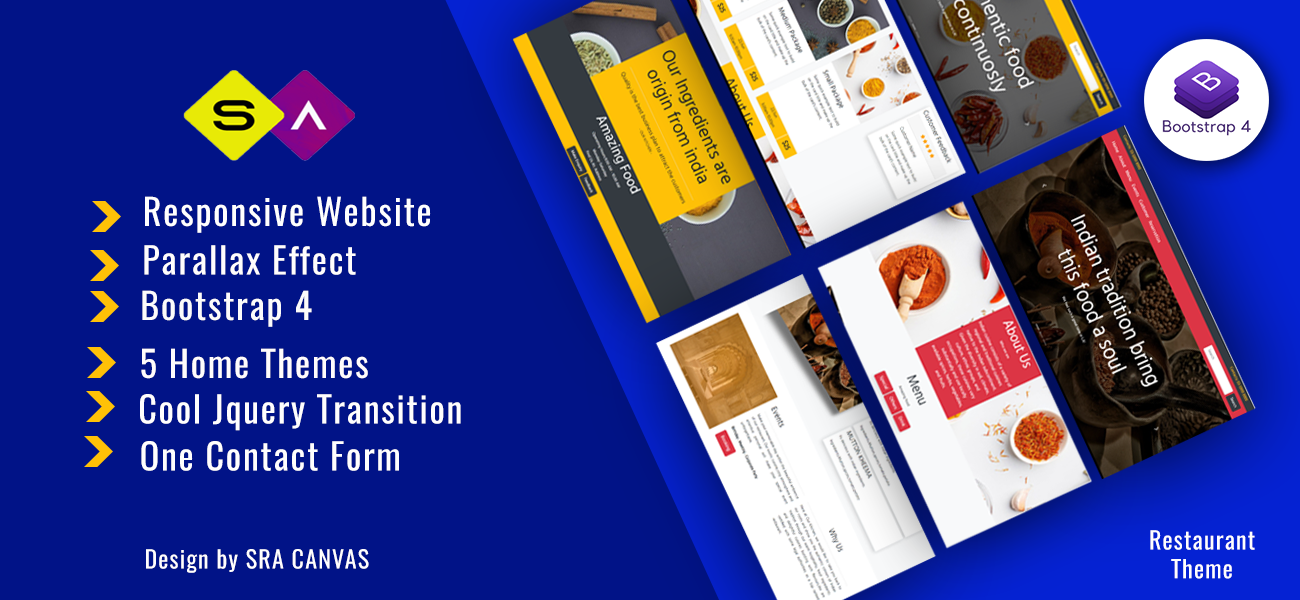
<style>
.page{position:relative;width:1300px;height:600px;background:#011387}
.page>*{position:absolute;margin:0}
.t1{font:36px "Oswald-Regular";letter-spacing:0.05em;color:#ffffff}
.t2{font:36px "Oswald-Regular";letter-spacing:0.05em;color:#fffdfd}
.t3{font:36px "Oswald-Regular";letter-spacing:0.05em;color:#fcfbfb}
.t4{font:36px "Oswald-Regular";letter-spacing:0.05em;color:#fffcfc}
.t5{font:36px "Oswald-Regular";letter-spacing:0.05em;color:#fffefe}
.t6{font:24px "Oswald-Regular";letter-spacing:0.05em;color:#fffefe}
</style>
<div class="page">
<p class="t1" style="left:145px;top:196px;width:286px;height:37px">Responsive Website</p>
<p class="t2" style="left:144px;top:245px;width:212px;height:30px">Parallax Effect</p>
<p class="t3" style="left:142px;top:290px;width:170px;height:37px">Bootstrap 4</p>
<p class="t4" style="left:141px;top:348px;width:227px;height:31px">5 Home Themes</p>
<p class="t5" style="left:140px;top:394px;width:321px;height:37px">Cool Jquery Transition</p>
<p class="t5" style="left:141px;top:441px;width:258px;height:30px">One Contact Form</p>
<p class="t6" style="left:1150px;top:530px;width:105px;height:49px;text-align:center">Restaurant<br>Theme</p>
<p class="t6" style="left:146px;top:549px;width:223px;height:24px">Design by SRA CANVAS</p>
</div>
